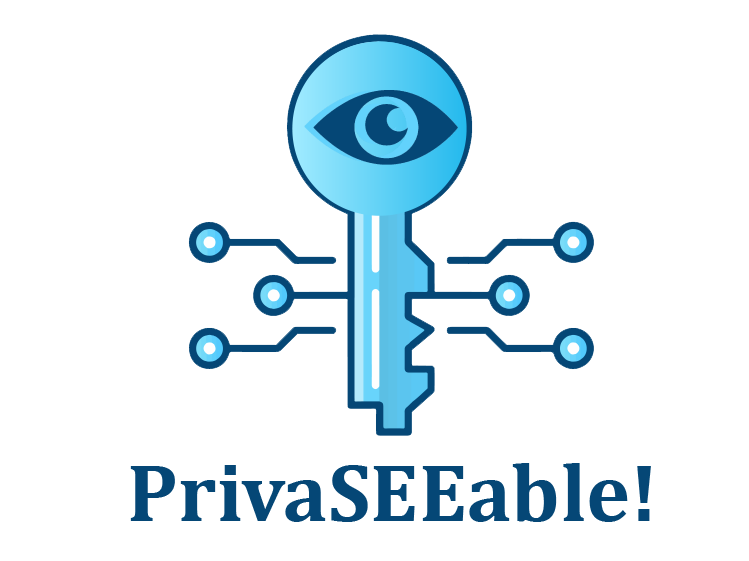
<style>
.page{position:relative;width:749px;height:561px;background:#ffffff}
.page>*{position:absolute;margin:0}
.t1{font:83.3px "Cambria-Bold";color:#054776}
</style>
<div class="page">
<p class="t1" style="left:130px;top:463px;width:521px;height:59px">PrivaSEEable!</p>
</div>
